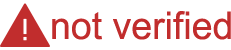
<style>
.page{position:relative;width:231px;height:50px;background:#ffffff}
.page>*{position:absolute;margin:0}
.t1{font:38.2px "ArialMT";color:#c12d2d}
</style>
<div class="page">
<p class="t1" style="left:52px;top:11px;width:179px;height:29px">not verified</p>
</div>
